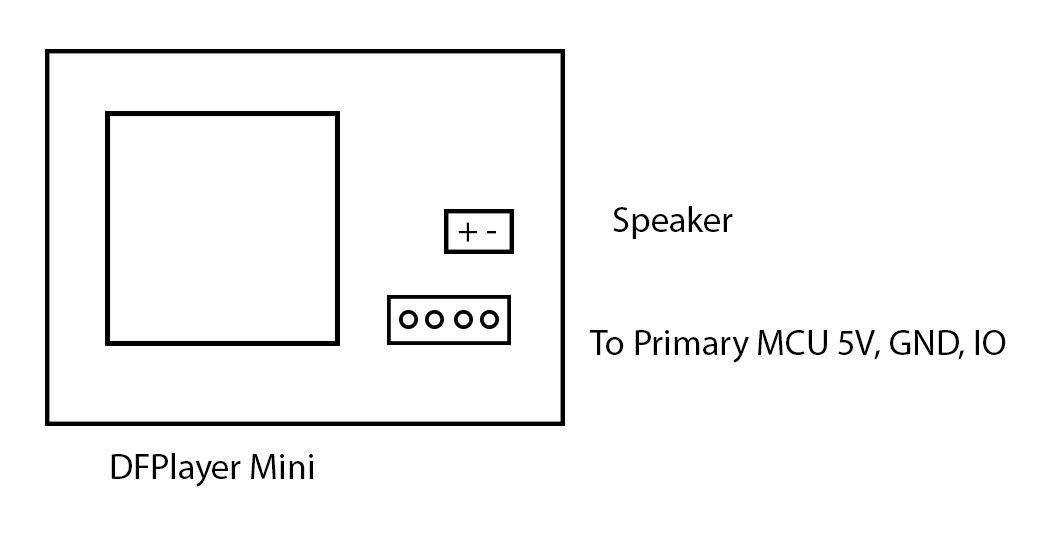
<style>
.page{position:relative;width:1042px;height:538px;background:#ffffff}
.page>*{position:absolute;margin:0}
.t1{font:36px "MyriadPro-Regular";color:#000000}
</style>
<div class="page">
<p class="t1" style="left:613px;top:206px;width:120px;height:33px">Speaker</p>
<p class="t1" style="left:458px;top:222px;width:38px;height:20px">+ -</p>
<p class="t1" style="left:589px;top:330px;width:417px;height:33px">To Primary MCU 5V, GND, IO</p>
<p class="t1" style="left:111px;top:453px;width:202px;height:34px">DFPlayer Mini</p>
</div>
